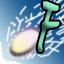
<style>
.page{position:relative;width:64px;height:64px}
.page>*{position:absolute;margin:0}
.t1{font:100px "HaanCjaB";font-weight:bold;scale:0.5 1}
</style>
<div class="page">
<p class="t1" style="left:37px;top:1px;width:23px;height:51px">F</p>
</div>
